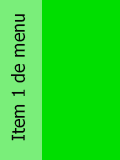
<style>
.page{position:relative;width:120px;height:160px;background:#00de00}
.page>*{position:absolute;margin:0}
.t1{font:18px "Tahoma";color:#070707}
</style>
<div class="page">
<p class="t1" style="left:10px;top:14px;width:16px;height:127px;rotate:-90deg">Item 1 de menu</p>
</div>
